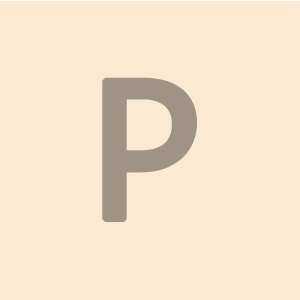
<style>
.page{position:relative;width:300px;height:300px;background:#fbe9d1}
.page>*{position:absolute;margin:0}
.t1{font:216.7px "Consolas";color:#9f9384;font-weight:bold}
</style>
<div class="page">
<p class="t1" style="left:102px;top:77px;width:95px;height:145px">P</p>
</div>
